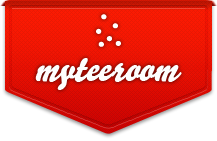
<style>
.page{position:relative;width:217px;height:141px}
.page>*{position:absolute;margin:0}
.t1{font:35.4px "Bello-Script";color:#fefefe;font-style:italic}
</style>
<div class="page">
<p class="t1" style="left:35px;top:58px;width:147px;height:32px">myteeroom</p>
</div>
